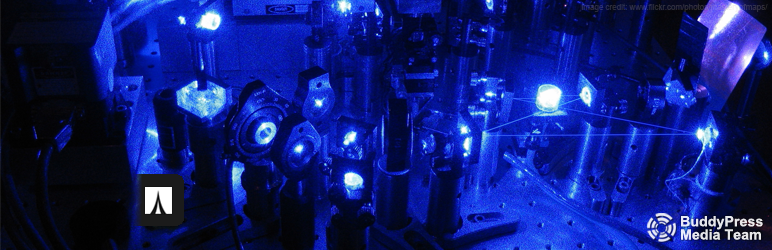
<style>
.page{position:relative;width:772px;height:250px}
.page>*{position:absolute;margin:0}
.t1{font:14.3px "Arial-BoldMT";color:#e7e7eb}
.t2{font:14.3px "Arial-BoldMT";color:#ffffff}
</style>
<div class="page">
<p class="t1" style="left:681px;top:216px;width:82px;height:14px">BuddyPress</p>
<p class="t2" style="left:681px;top:229px;width:80px;height:11px;opacity:0.9">Media Team</p>
</div>
